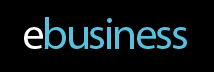
<style>
.page{position:relative;width:214px;height:72px;background:#000000}
.page>*{position:absolute;margin:0}
.t1{font:45px "MyriadPro-Regular";letter-spacing:-0.05em;color:#59c1e0}
.t2{font:45px "MyriadPro-Regular";letter-spacing:-0.05em;color:#ffffff}
</style>
<div class="page">
<p class="t1" style="left:24px;top:17px;width:163px;height:32px"><span class="t2">e</span>business</p>
</div>
